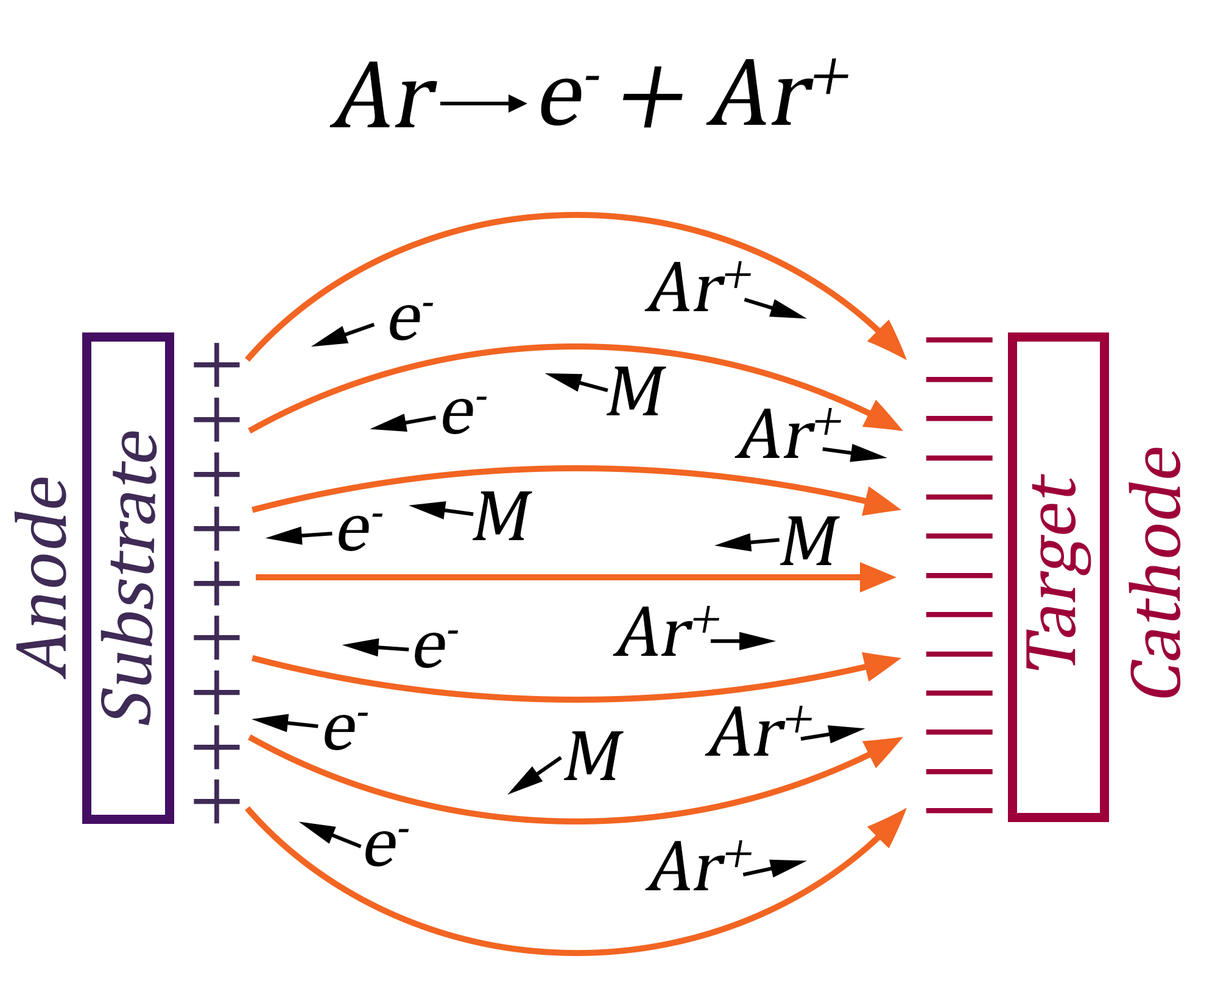
<style>
.page{position:relative;width:1215px;height:981px;background:#ffffff}
.page>*{position:absolute;margin:0}
.t1{font:97.5px "CambriaMath";color:#000000;font-style:italic}
.t2{font:73.1px "CambriaMath";color:#000000;font-style:italic}
.t3{font:73.1px "CambriaMath";color:#9e0039}
.t4{font:73.1px "CambriaMath";color:#3f2b56}
.t5{font:73.1px "CambriaMath";color:#3f2b56;font-style:italic}
.t6{font:73.1px "CambriaMath";color:#9e0039;font-style:italic}
</style>
<div class="page">
<p class="t1" style="left:330px;top:62px;width:107px;height:65px">Ar</p>
<p class="t1" style="left:541px;top:58px;width:307px;height:70px">e- + Ar+</p>
<p class="t2" style="left:644px;top:261px;width:107px;height:50px">Ar+</p>
<p class="t2" style="left:390px;top:303px;width:44px;height:37px">e-</p>
<p class="t3" style="left:926px;top:337px;width:67px;height:477px;rotate:-90deg">| | | | | | | | | | | | |</p>
<p class="t4" style="left:194px;top:343px;width:46px;height:481px;rotate:-90deg">+++++++++</p>
<p class="t2" style="left:606px;top:367px;width:60px;height:48px">M</p>
<p class="t2" style="left:443px;top:397px;width:44px;height:37px">e-</p>
<p class="t2" style="left:735px;top:408px;width:106px;height:50px">Ar+</p>
<p class="t5" style="left:101px;top:431px;width:56px;height:295px;rotate:-89deg">Substrate</p>
<p class="t6" style="left:1129px;top:448px;width:52px;height:250px;rotate:-90deg">Cathode</p>
<p class="t6" style="left:1026px;top:474px;width:66px;height:197px;rotate:-90deg">Target</p>
<p class="t5" style="left:14px;top:478px;width:52px;height:202px;rotate:-90deg">Anode</p>
<p class="t2" style="left:472px;top:492px;width:60px;height:48px">M</p>
<p class="t2" style="left:339px;top:513px;width:44px;height:38px">e-</p>
<p class="t2" style="left:780px;top:517px;width:60px;height:48px">M</p>
<p class="t2" style="left:613px;top:606px;width:106px;height:50px">Ar+</p>
<p class="t2" style="left:415px;top:630px;width:44px;height:38px">e-</p>
<p class="t2" style="left:325px;top:713px;width:44px;height:37px">e-</p>
<p class="t2" style="left:705px;top:706px;width:107px;height:50px">Ar+</p>
<p class="t2" style="left:563px;top:732px;width:61px;height:48px">M</p>
<p class="t2" style="left:365px;top:829px;width:44px;height:38px">e-</p>
<p class="t2" style="left:645px;top:841px;width:107px;height:50px">Ar+</p>
</div>
